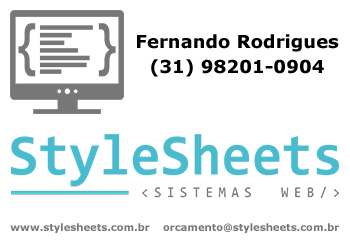
<style>
.page{position:relative;width:350px;height:250px;background:#ffffff}
.page>*{position:absolute;margin:0}
.t1{font:18px "Verdana-Bold";color:#000000}
.t2{font:10px "Verdana-Bold";color:#777777}
</style>
<div class="page">
<p class="t1" style="left:137px;top:34px;width:202px;height:18px">Fernando Rodrigues</p>
<p class="t1" style="left:151px;top:59px;width:173px;height:18px">(31) 98201-0904</p>
<p class="t2" style="left:10px;top:223px;width:140px;height:10px">www.stylesheets.com.br</p>
<p class="t2" style="left:163px;top:223px;width:176px;height:10px">orcamento@stylesheets.com.br</p>
</div>
